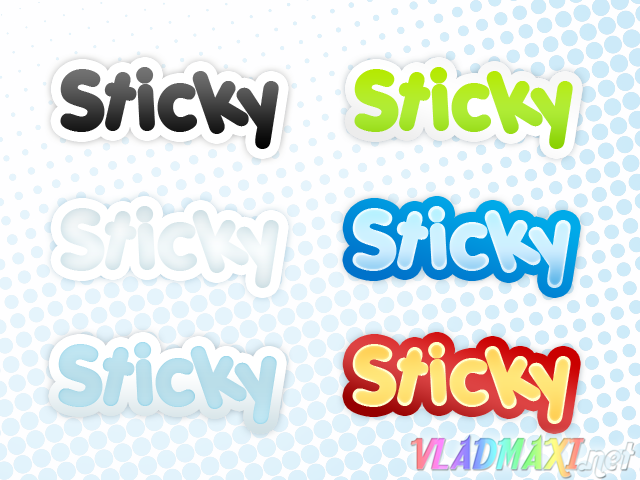
<style>
.page{position:relative;width:640px;height:480px;background:#fefeff}
.page>*{position:absolute;margin:0}
.t1{font:80px "Porkys";letter-spacing:0.025em}
.t2{font:80px "Porkys";letter-spacing:0.025em;color:#b2eb28}
.t3{font:80px "Porkys";letter-spacing:0.025em;color:#e9f2f4}
.t4{font:80px "Porkys";letter-spacing:0.025em;color:#cdf1ff}
.t5{font:80px "Porkys";letter-spacing:0.025em;color:#b9deeb}
</style>
<div class="page">
<p class="t1" style="left:60px;top:67px;width:219px;height:82px">Sticky</p>
<p class="t2" style="left:354px;top:67px;width:219px;height:82px">Sticky</p>
<p class="t3" style="left:60px;top:206px;width:219px;height:82px">Sticky</p>
<p class="t4" style="left:352px;top:206px;width:219px;height:82px">Sticky</p>
<p class="t5" style="left:58px;top:342px;width:219px;height:82px">Sticky</p>
<p class="t1" style="left:352px;top:342px;width:219px;height:82px">Sticky</p>
</div>
